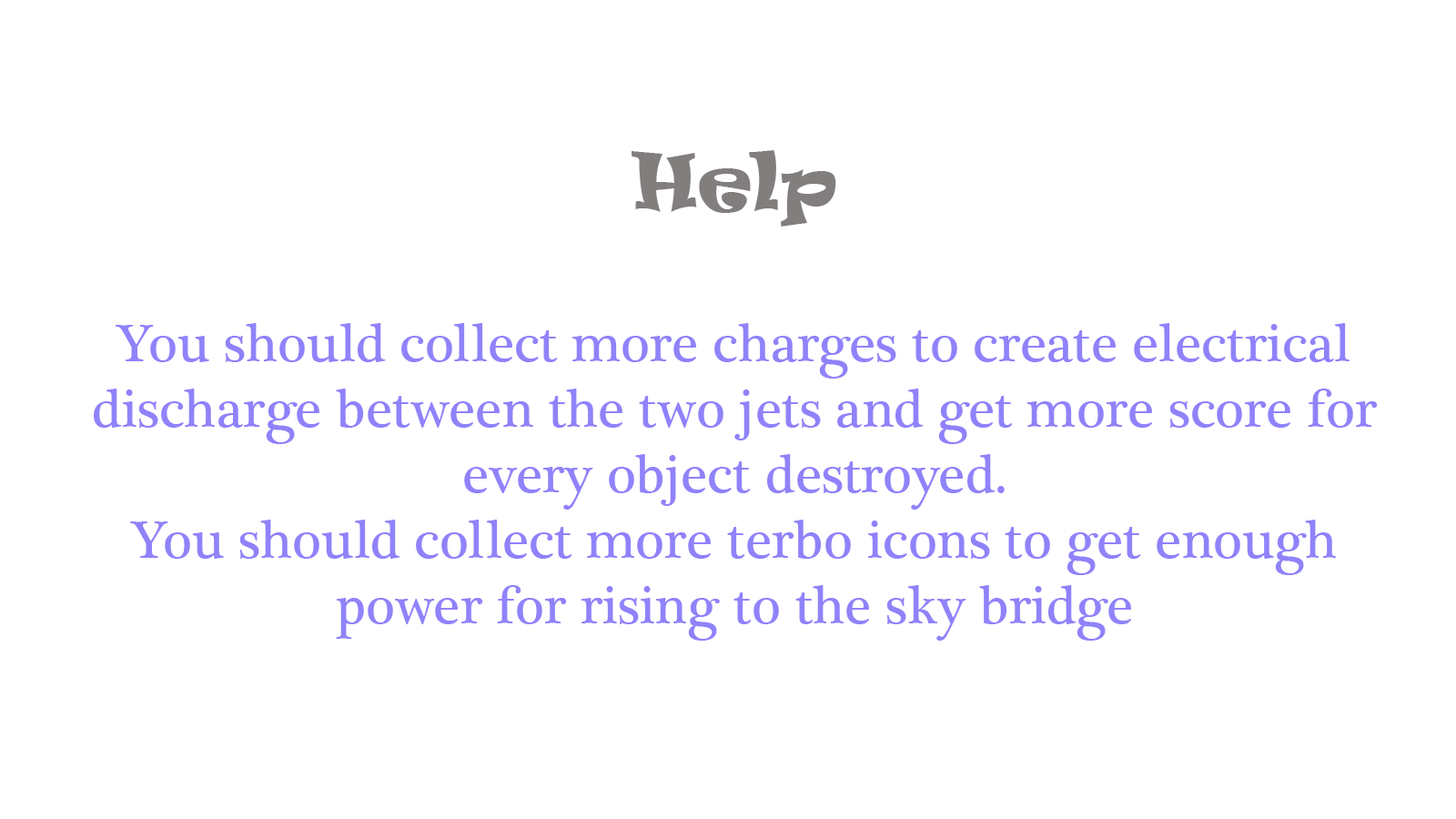
<style>
.page{position:relative;width:1456px;height:819px;background:#ffffff}
.page>*{position:absolute;margin:0}
.t1{font:54.6px "PlantagenetCherokee";color:#9082fa}
.t2{font:72.8px "Papyrus-Regular";color:#ff9a9a}
.t3{font:72.8px "Ravie";color:#827e7e}
</style>
<div class="page">
<p class="t1" style="left:94px;top:150px;width:1284px;height:491px;text-align:center"><span class="t2"><br></span><span class="t3">Help<br><br></span>You should collect more charges to create electrical <br>discharge between the two jets and get more score for every object destroyed.<br>You should collect more terbo icons to get enough power for rising to the sky bridge</p>
</div>
